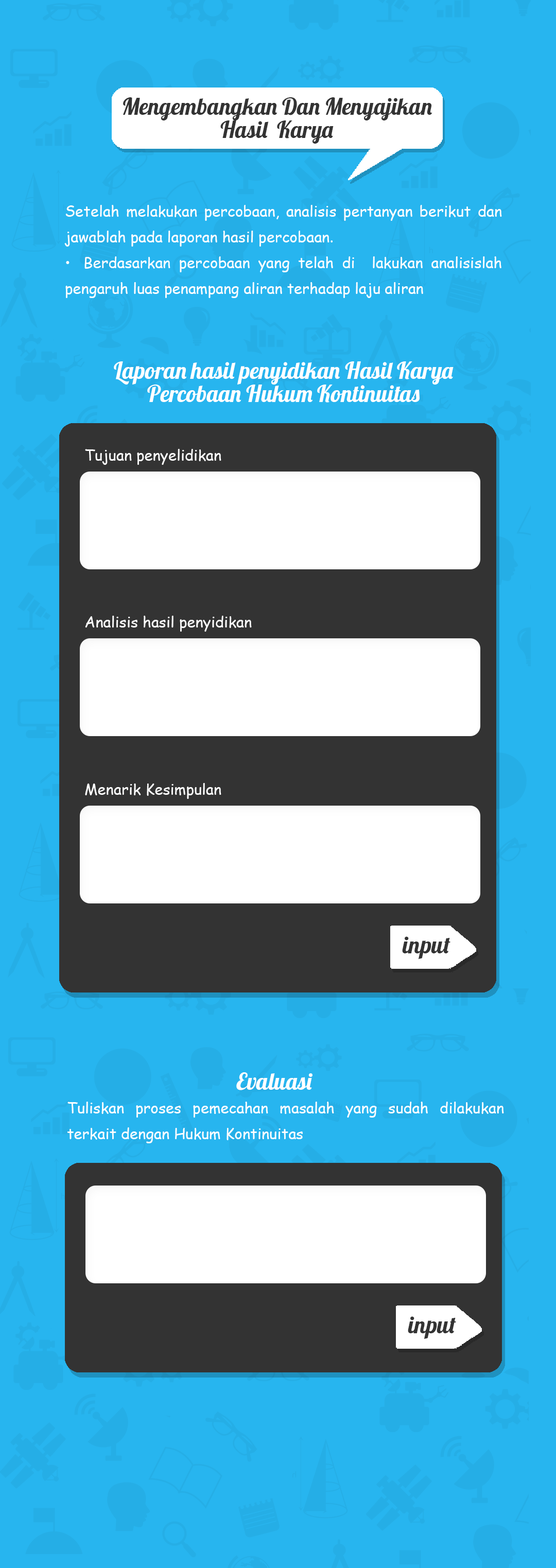
<style>
.page{position:relative;width:556px;height:1568px;background:#27b5ef}
.page>*{position:absolute;margin:0}
.t1{font:22.9px/22.9px "Lobster-Regular";color:#333333}
.t2{font:15px/25.7px "ComicSansMS";color:#ffffff}
.t3{font:22.9px/22.9px "Lobster-Regular";color:#ffffff}
.t4{font:15px "ComicSansMS";color:#ffffff}
.t5{font:23.6px "Lobster-Regular";color:#333333}
.t6{font:22.9px "Lobster-Regular";color:#ffffff}
</style>
<div class="page">
<p class="t1" style="left:123px;top:97px;width:309px;height:47px;text-align:center">Mengembangkan Dan Menyajikan<br>Hasil  Karya</p>
<p class="t2" style="left:64px;top:205px;width:438px;height:93px;text-align:justify">Setelah melakukan percobaan, analisis pertanyan berikut dan jawablah pada laporan hasil percobaan. <br>• Berdasarkan percobaan yang telah di  lakukan analisislah pengaruh luas penampang aliran terhadap laju aliran</p>
<p class="t3" style="left:114px;top:361px;width:340px;height:42px;text-align:center">Laporan hasil penyidikan Hasil Karya Percobaan Hukum Kontinuitas</p>
<p class="t4" style="left:85px;top:449px;width:136px;height:16px">Tujuan penyelidikan</p>
<p class="t4" style="left:85px;top:616px;width:167px;height:16px">Analisis hasil penyidikan</p>
<p class="t4" style="left:85px;top:783px;width:136px;height:16px">Menarik Kesimpulan</p>
<p class="t5" style="left:402px;top:936px;width:48px;height:23px">input</p>
<p class="t6" style="left:236px;top:1072px;width:76px;height:18px">Evaluasi</p>
<p class="t2" style="left:67px;top:1102px;width:437px;height:41px;text-align:justify">Tuliskan proses pemecahan masalah yang sudah dilakukan terkait dengan Hukum Kontinuitas</p>
<p class="t5" style="left:408px;top:1316px;width:48px;height:23px">input</p>
</div>
